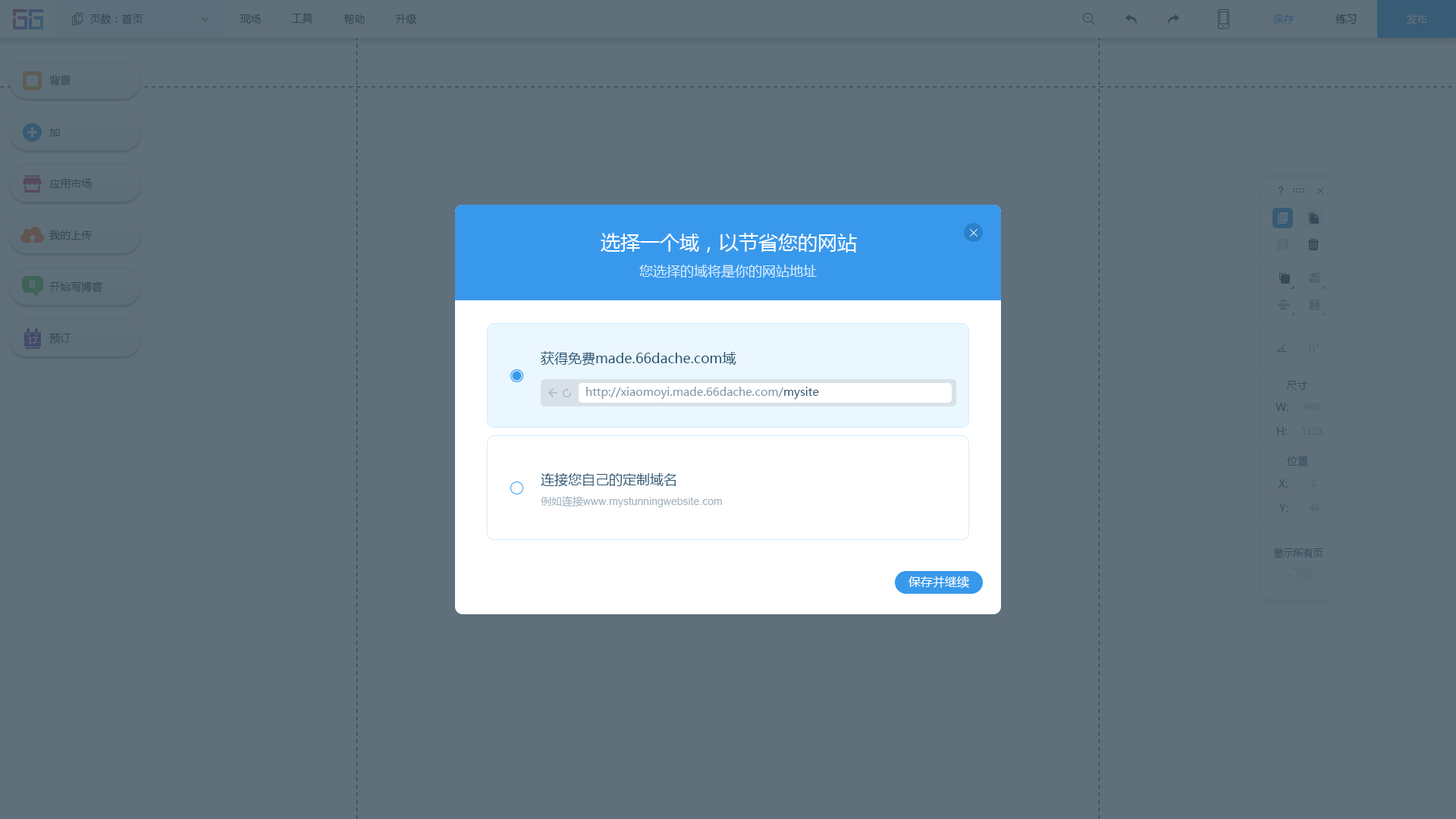
<style>
.page{position:relative;width:1456px;height:819px;background:#60707a}
.page>*{position:absolute;margin:0}
.t1{font:10.6px "MicrosoftYaHei";color:#20303c}
.t2{font:10.6px "MicrosoftYaHei";color:#334653}
.t3{font:10.6px "MicrosoftYaHei";color:#385b76}
.t4{font:10.6px "MicrosoftYaHei";color:#2d3d47}
.t5{font:10.6px "MicrosoftYaHei";color:#60707a}
.t6{font:10.6px "MicrosoftYaHei";color:#283a48}
.t7{font:19.7px "MicrosoftYaHei";color:#ffffff}
.t8{font:13.6px "MicrosoftYaHei";color:#d3edff}
.t9{font:13.6px "MicrosoftYaHei";color:#2b5672}
.t10{font:10.6px "MicrosoftYaHei";color:#52626d}
.t11{font:11.4px "MicrosoftYaHei";color:#7f96a8}
.t12{font:11.4px "MicrosoftYaHei";color:#2d5773}
.t13{font:10.6px "MicrosoftYaHei";color:#2b5672}
.t14{font:9.1px "MicrosoftYaHei";color:#52626d}
.t15{font:10.6px "ArialMT";color:#a5b6c2}
.t16{font:10.6px "MicrosoftYaHei";color:#a5b6c2}
.t17{font:9.9px "MicrosoftYaHei";color:#2b5672}
.t18{font:12.1px "MicrosoftYaHei";color:#ffffff}
</style>
<div class="page">
<p class="t1" style="left:89px;top:14px;width:54px;height:11px">页数：首页</p>
<p class="t1" style="left:240px;top:14px;width:21px;height:10px">现场</p>
<p class="t1" style="left:291px;top:13px;width:22px;height:11px">工具</p>
<p class="t2" style="left:344px;top:14px;width:21px;height:11px">帮助</p>
<p class="t2" style="left:395px;top:14px;width:22px;height:10px">升级</p>
<p class="t3" style="left:1272px;top:14px;width:22px;height:10px">保存</p>
<p class="t4" style="left:1335px;top:14px;width:22px;height:10px">练习</p>
<p class="t5" style="left:1406px;top:14px;width:22px;height:10px">发布</p>
<p class="t6" style="left:49px;top:75px;width:22px;height:11px">背景</p>
<p class="t6" style="left:49px;top:127px;width:11px;height:9px">加</p>
<p class="t6" style="left:49px;top:179px;width:43px;height:9px">应用市场</p>
<p class="t6" style="left:49px;top:230px;width:44px;height:11px">我的上传</p>
<p class="t7" style="left:601px;top:233px;width:256px;height:20px">选择一个域，以节省您的网站</p>
<p class="t8" style="left:639px;top:265px;width:178px;height:13px">您选择的域将是你的网站地址</p>
<p class="t6" style="left:49px;top:281px;width:54px;height:12px">开始写博客</p>
<p class="t6" style="left:49px;top:333px;width:22px;height:11px">预订</p>
<p class="t9" style="left:541px;top:351px;width:195px;height:15px">获得免费made.66dache.com域</p>
<p class="t10" style="left:1309px;top:344px;width:10px;height:9px">0°</p>
<p class="t11" style="left:586px;top:387px;width:233px;height:12px">http://xiaomoyi.made.66dache.com/<span class="t12">mysite</span></p>
<p class="t13" style="left:1286px;top:381px;width:21px;height:9px">尺寸</p>
<p class="t13" style="left:1275px;top:403px;width:13px;height:8px">W:</p>
<p class="t14" style="left:1304px;top:403px;width:16px;height:7px">980</p>
<p class="t13" style="left:1277px;top:427px;width:10px;height:8px">H:</p>
<p class="t14" style="left:1301px;top:428px;width:22px;height:7px">5123</p>
<p class="t13" style="left:1287px;top:456px;width:22px;height:10px">位置</p>
<p class="t9" style="left:541px;top:472px;width:135px;height:15px">连接您自己的定制域名</p>
<p class="t13" style="left:1279px;top:479px;width:9px;height:9px">X:</p>
<p class="t14" style="left:1311px;top:480px;width:5px;height:7px">0</p>
<p class="t15" style="left:541px;top:496px;width:181px;height:11px"><span class="t16">例如连接</span>www.mystunningwebsite.com</p>
<p class="t13" style="left:1279px;top:504px;width:9px;height:8px">Y:</p>
<p class="t14" style="left:1309px;top:504px;width:10px;height:7px">48</p>
<p class="t17" style="left:1273px;top:548px;width:50px;height:10px">显示所有页</p>
<p class="t18" style="left:908px;top:576px;width:61px;height:12px">保存并继续</p>
</div>
